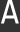
<style>
.page{position:relative;width:20px;height:32px;background:#333333}
.page>*{position:absolute;margin:0}
.t1{font:36.7px "Consolas";color:#ffffff;scale:0.91 1}
</style>
<div class="page">
<p class="t1" style="left:1px;top:0px;width:18px;height:24px">A</p>
</div>
